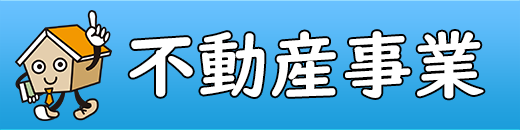
<style>
.page{position:relative;width:520px;height:130px}
.page>*{position:absolute;margin:0}
.t1{font:72px "UDDigiKyokashoNP-B";color:#ffffff}
</style>
<div class="page">
<p class="t1" style="left:129px;top:31px;width:355px;height:68px">不動産事業</p>
</div>
